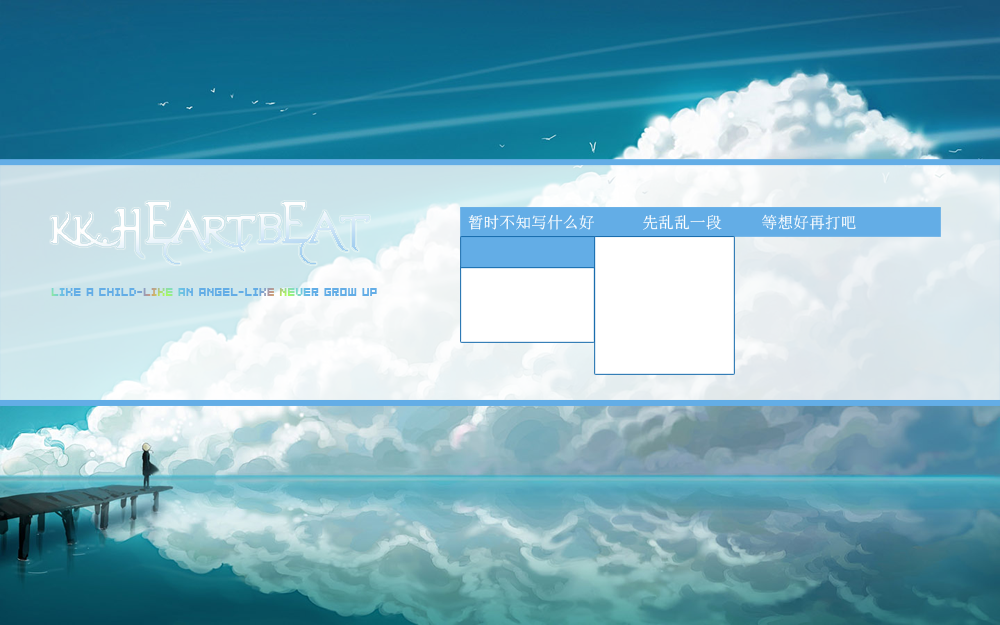
<style>
.page{position:relative;width:1000px;height:625px}
.page>*{position:absolute;margin:0}
.t1{font:66.1px "Evanescent";color:#fefdfd}
.t2{font:15.9px "SimSun";color:#ffffff}
.t3{font:12.7px "SG08";color:#63ade6}
</style>
<div class="page">
<p class="t1" style="left:51px;top:202px;width:318px;height:62px">KK.HEARTBEAT</p>
<p class="t2" style="left:468px;top:214px;width:388px;height:16px">暂时不知写什么好      先乱乱一段     等想好再打吧</p>
<p class="t3" style="left:51px;top:288px;width:326px;height:8px">LIKE A CHILD-LIKE AN ANGEL-LIKE NEVER GROW UP</p>
</div>
